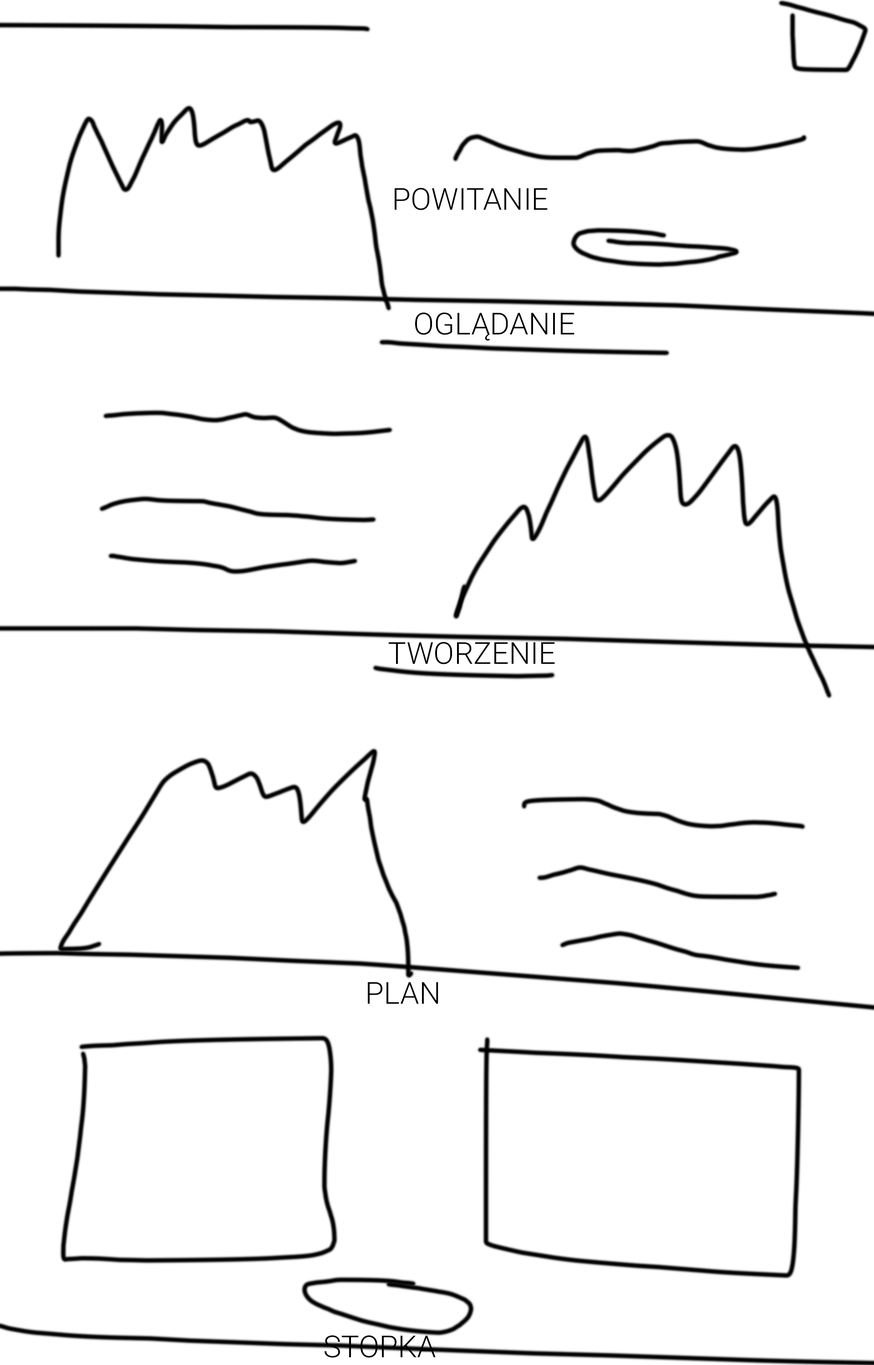
<style>
.page{position:relative;width:874px;height:1365px;background:#ffffff}
.page>*{position:absolute;margin:0}
.t1{font:30.3px "Roboto-Light";color:#000000}
</style>
<div class="page">
<p class="t1" style="left:394px;top:188px;width:153px;height:22px">POWITANIE</p>
<p class="t1" style="left:415px;top:313px;width:159px;height:28px">OGLĄDANIE</p>
<p class="t1" style="left:388px;top:642px;width:167px;height:22px">TWORZENIE</p>
<p class="t1" style="left:368px;top:982px;width:70px;height:22px">PLAN</p>
<p class="t1" style="left:324px;top:1335px;width:111px;height:23px">STOPKA</p>
</div>
